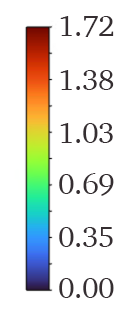
<style>
.page{position:relative;width:136px;height:313px;background:#ffffff}
.page>*{position:absolute;margin:0}
.t1{font:30px "Charter-Roman";letter-spacing:-0.02em;color:#352e31}
</style>
<div class="page">
<p class="t1" style="left:60px;top:16px;width:54px;height:21px">1.72</p>
<p class="t1" style="left:60px;top:70px;width:54px;height:20px">1.38</p>
<p class="t1" style="left:60px;top:123px;width:53px;height:20px">1.03</p>
<p class="t1" style="left:59px;top:173px;width:55px;height:23px">0.69</p>
<p class="t1" style="left:59px;top:227px;width:54px;height:20px">0.35</p>
<p class="t1" style="left:59px;top:278px;width:55px;height:20px">0.00</p>
</div>
